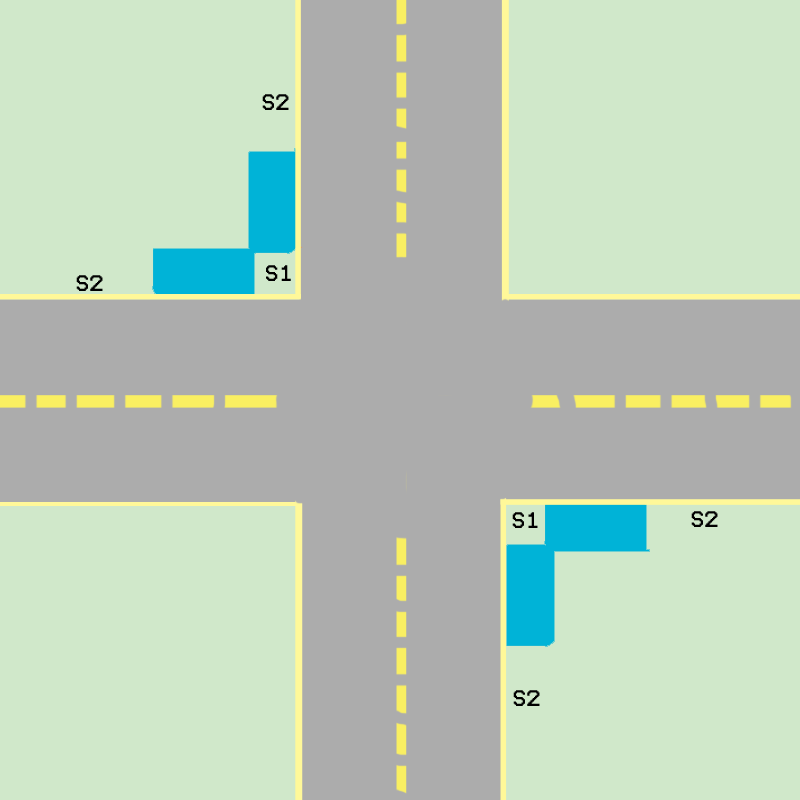
<style>
.page{position:relative;width:800px;height:800px;background:#d0e8ca}
.page>*{position:absolute;margin:0}
.t1{font:18px "Terminal";color:#000000}
</style>
<div class="page">
<p class="t1" style="left:262px;top:94px;width:27px;height:16px">S2</p>
<p class="t1" style="left:266px;top:265px;width:25px;height:16px">S1</p>
<p class="t1" style="left:76px;top:275px;width:27px;height:16px">S2</p>
<p class="t1" style="left:512px;top:512px;width:26px;height:16px">S1</p>
<p class="t1" style="left:691px;top:511px;width:27px;height:16px">S2</p>
<p class="t1" style="left:513px;top:690px;width:27px;height:16px">S2</p>
</div>
